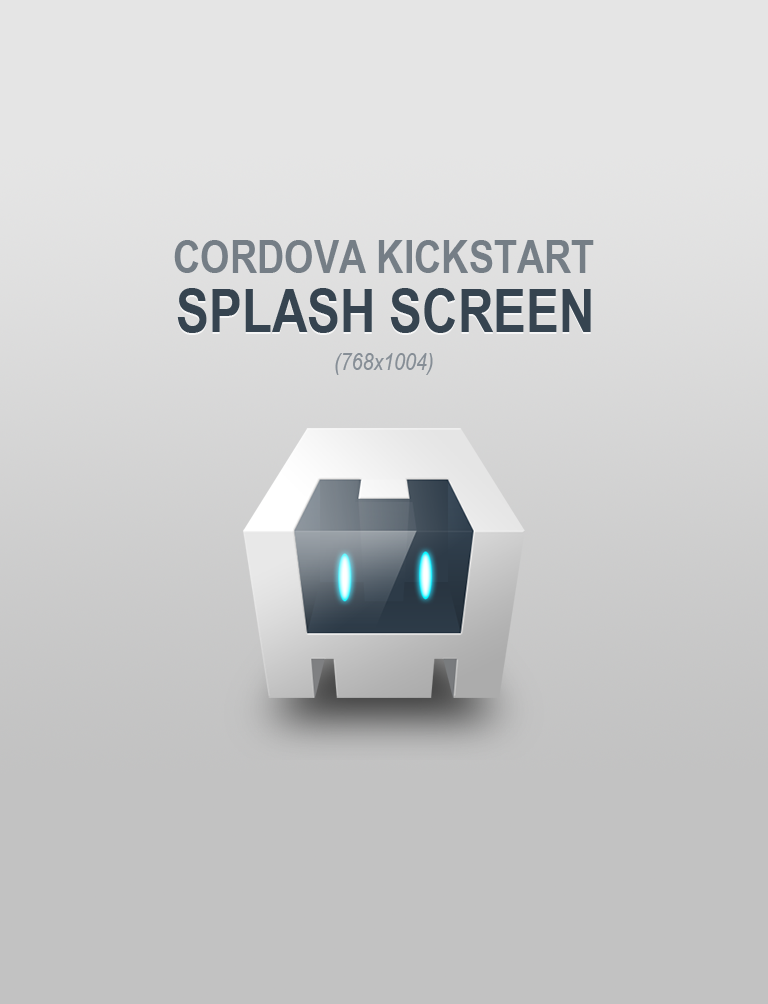
<style>
.page{position:relative;width:768px;height:1004px;background:#c2c2c2}
.page>*{position:absolute;margin:0}
.t1{font:46px "ArialNarrow-Bold";color:#757e86;text-transform:uppercase}
.t2{font:60px "ArialNarrow-Bold";color:#364450;text-transform:uppercase}
.t3{font:24px "ArialNarrow-Italic";color:#868e96}
</style>
<div class="page">
<p class="t1" style="left:174px;top:240px;width:420px;height:33px">Cordova Kickstart</p>
<p class="t2" style="left:177px;top:288px;width:414px;height:45px">Splash Screen</p>
<p class="t3" style="left:335px;top:353px;width:98px;height:22px">(768x1004)</p>
</div>
